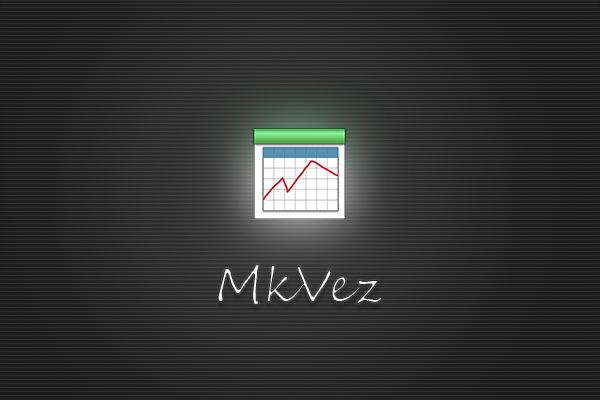
<style>
.page{position:relative;width:600px;height:400px}
.page>*{position:absolute;margin:0}
.t1{font:48px "SegoeScript"}
</style>
<div class="page">
<p class="t1" style="left:217px;top:264px;width:165px;height:41px">MkVez</p>
</div>
